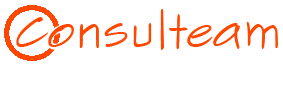
<style>
.page{position:relative;width:283px;height:93px;background:#ffffff}
.page>*{position:absolute;margin:0}
.t1{font:48px "SketchFlowPrint";color:#ff4700}
</style>
<div class="page">
<p class="t1" style="left:16px;top:9px;width:262px;height:41px">Consulteam</p>
</div>
